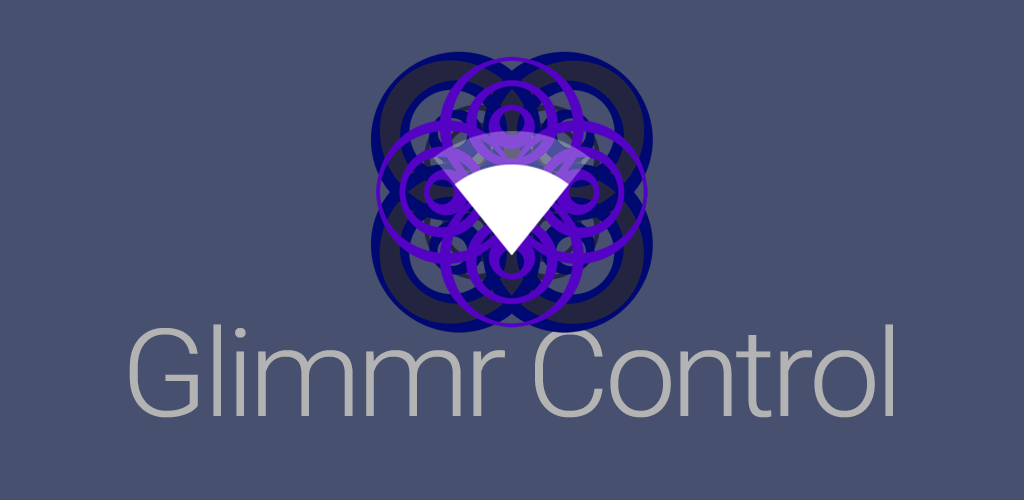
<style>
.page{position:relative;width:1024px;height:500px;background:#47516f}
.page>*{position:absolute;margin:0}
.t1{font:122px "Roboto-Light";letter-spacing:-0.04em;color:#b3b3b3;scale:1.04 1}
</style>
<div class="page">
<p class="t1" style="left:129px;top:324px;width:764px;height:94px">Glimmr Control</p>
</div>
